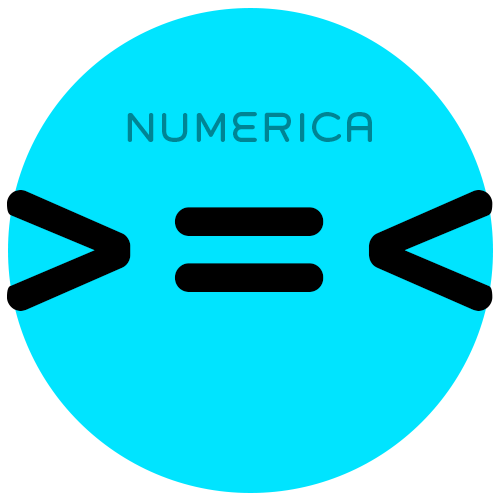
<style>
.page{position:relative;width:500px;height:500px;background:#00e4ff}
.page>*{position:absolute;margin:0}
.t1{font:37.5px "GroverCaps";color:#008494}
.t2{font:300px "GroverCaps";color:#000000}
</style>
<div class="page">
<p class="t1" style="left:127px;top:112px;width:245px;height:30px">NUMERICA</p>
<p class="t2" style="left:6px;top:190px;width:487px;height:121px">&gt;=&lt;</p>
</div>
